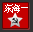
<style>
.page{position:relative;width:33px;height:32px;background:#c50000}
.page>*{position:absolute;margin:0}
.t1{font:10.4px "SimSun";letter-spacing:-0.25em;color:#ffffff}
</style>
<div class="page">
<p class="t1" style="left:4px;top:4px;width:24px;height:9px">东海一</p>
</div>
